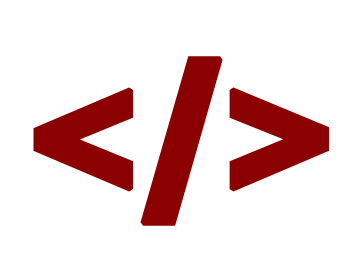
<style>
.page{position:relative;width:353px;height:275px;background:#ffffff}
.page>*{position:absolute;margin:0}
.t1{font:200px "Impact";color:#8b0000;font-weight:bold}
</style>
<div class="page">
<p class="t1" style="left:33px;top:56px;width:296px;height:170px">&lt;/&gt;</p>
</div>
